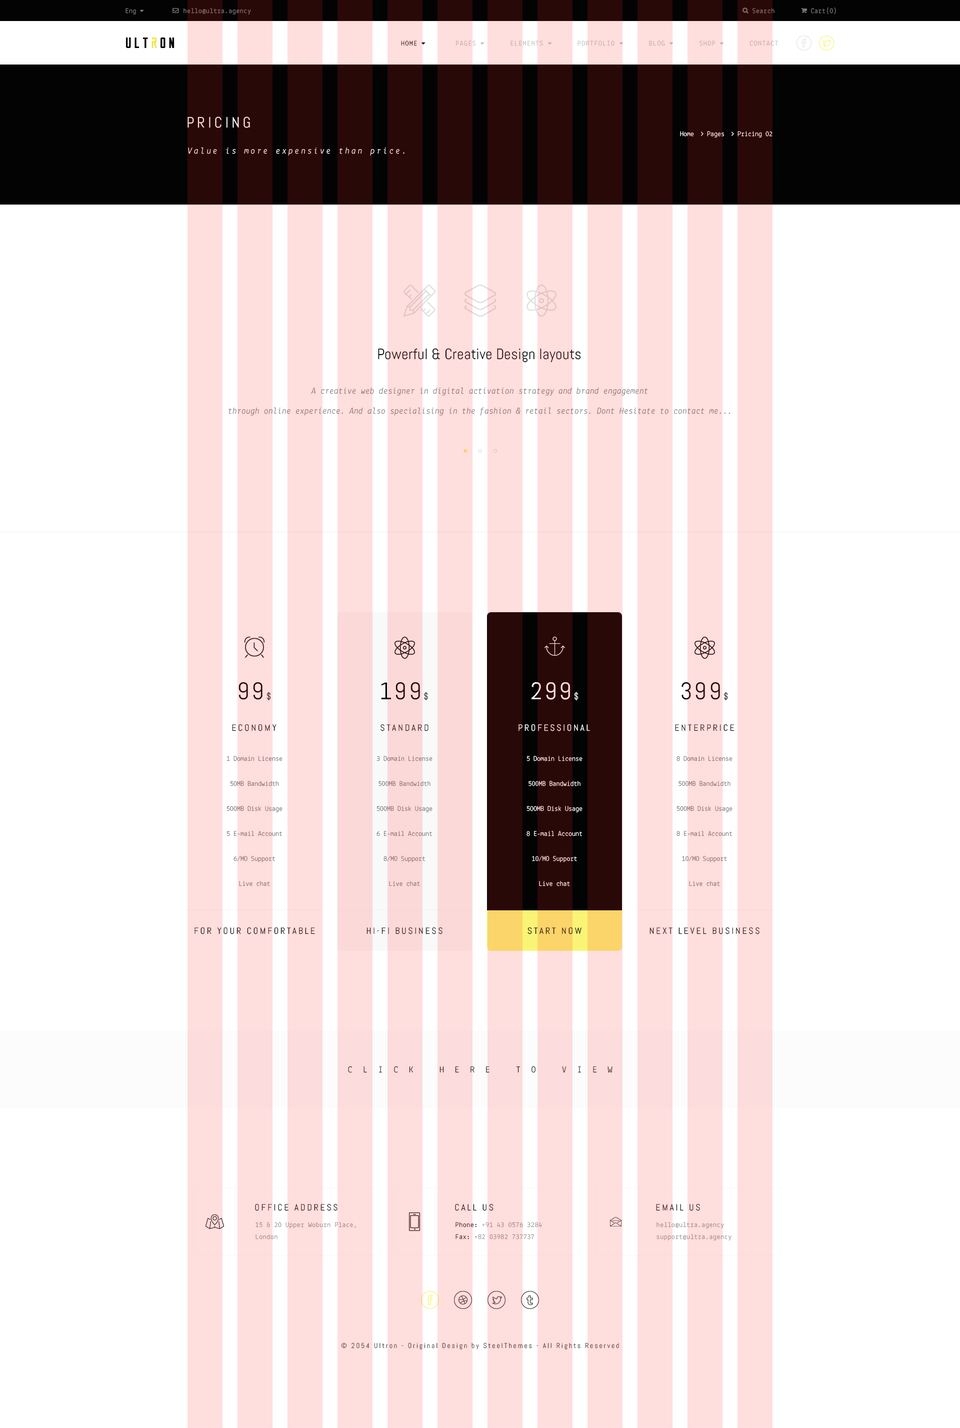
<style>
.page{position:relative;width:960px;height:1428px;background:#ffffff}
.page>*{position:absolute;margin:0}
.t1{font:7px "Lekton-Regular";letter-spacing:0.04em;color:#787878}
.t2{font:7px "Lekton-Regular";letter-spacing:0.1em;color:#bfbfbf;text-transform:uppercase}
.t3{font:7px "Lekton-Regular";letter-spacing:0.1em;color:#030303;text-transform:uppercase}
.t4{font:15px "Abel-Regular";letter-spacing:0.2em;color:#ffdede;text-transform:uppercase}
.t5{font:9px "Lekton-Italic";letter-spacing:0.2em;color:#ffdede}
.t6{font:15px "Abel-Regular"}
.t7{font:9px/20px "Lekton-Italic";color:#8c6b6b}
.t8{font:24px "Abel-Regular";letter-spacing:0.1em;color:#290808}
.t9{font:9px "Abel-Regular";letter-spacing:0.1em;color:#290808}
.t10{font:24px "Abel-Regular";letter-spacing:0.1em;color:#ffdede}
.t11{font:9px "Abel-Regular";letter-spacing:0.1em;color:#ffdede}
.t12{font:9px "Abel-Regular";letter-spacing:0.2em;text-transform:uppercase}
.t13{font:9px "Abel-Regular";letter-spacing:0.2em;color:#290808;text-transform:uppercase}
.t14{font:9px "Abel-Regular";letter-spacing:0.2em;color:#160505;text-transform:uppercase}
.t15{font:7px/25px "Lekton-Regular";color:#787878}
.t16{font:7px/25px "Lekton-Regular"}
.t17{font:9px "Lekton-Regular";letter-spacing:1.2em;color:#290808;text-transform:uppercase}
.t18{font:7px/12px "Lekton-Regular";letter-spacing:0.04em;color:#969595}
.t19{font:7px/12px "Lekton-Regular";letter-spacing:0.04em;color:#030303}
.t20{font:7px "Abel-Regular";letter-spacing:0.2em;color:#694848}
</style>
<div class="page">
<p class="t1" style="left:126px;top:8px;width:10px;height:7px">Eng</p>
<p class="t1" style="left:184px;top:8px;width:67px;height:7px">hello@ultra.agency</p>
<p class="t1" style="left:753px;top:8px;width:22px;height:6px">Search</p>
<p class="t1" style="left:811px;top:7px;width:25px;height:8px">Cart(0)</p>
<p class="t2" style="left:401px;top:41px;width:377px;height:5px"><span class="t3">Home         </span>Pages        Elements        Portfolio        Blog        Shop        Contact</p>
<p class="t4" style="left:188px;top:117px;width:62px;height:11px">pricing</p>
<p class="t5" style="left:188px;top:147px;width:217px;height:9px">Value is more expensive than price.</p>
<p class="t6" style="left:378px;top:348px;width:203px;height:15px">Powerful &amp; Creative Design layouts</p>
<p class="t7" style="left:229px;top:387px;width:501px;height:29px;text-align:center">A creative web designer in digital activation strategy and brand engagement<br>through online experience. And also specialising in the fashion &amp; retail sectors. Dont Hesitate to contact me...</p>
<p class="t8" style="left:239px;top:682px;width:32px;height:19px">99<span class="t9">$</span></p>
<p class="t8" style="left:381px;top:682px;width:47px;height:19px">199<span class="t9">$</span></p>
<p class="t10" style="left:532px;top:682px;width:47px;height:19px">299<span class="t11">$</span></p>
<p class="t8" style="left:682px;top:682px;width:46px;height:19px">399<span class="t9">$</span></p>
<p class="t12" style="left:232px;top:724px;width:45px;height:7px">economy</p>
<p class="t13" style="left:381px;top:724px;width:48px;height:7px">Standard</p>
<p class="t12" style="left:519px;top:724px;width:71px;height:7px">Professional</p>
<p class="t14" style="left:675px;top:724px;width:60px;height:7px">enterprice</p>
<p class="t15" style="left:227px;top:756px;width:56px;height:130px;text-align:center">1 Domain License<br>50MB Bandwidth<br>500MB Disk Usage<br>5 E-mail Account<br>6/MO Support<br>Live chat</p>
<p class="t15" style="left:377px;top:756px;width:56px;height:130px;text-align:center">3 Domain License<br>500MB Bandwidth<br>500MB Disk Usage<br>6 E-mail Account<br>8/MO Support<br>Live chat</p>
<p class="t16" style="left:527px;top:756px;width:56px;height:130px;text-align:center">5 Domain License<br>500MB Bandwidth<br>500MB Disk Usage<br>8 E-mail Account<br>10/MO Support<br>Live chat</p>
<p class="t15" style="left:677px;top:756px;width:56px;height:130px;text-align:center">8 Domain License<br>500MB Bandwidth<br>500MB Disk Usage<br>8 E-mail Account<br>10/MO Support<br>Live chat</p>
<p class="t12" style="left:195px;top:927px;width:120px;height:7px">for your comfortable</p>
<p class="t12" style="left:367px;top:927px;width:76px;height:7px">Hi-fi business</p>
<p class="t12" style="left:528px;top:927px;width:54px;height:7px">start Now</p>
<p class="t13" style="left:650px;top:927px;width:110px;height:7px">next level business</p>
<p class="t17" style="left:348px;top:1066px;width:265px;height:7px">Click here to view</p>
<p class="t12" style="left:255px;top:1204px;width:83px;height:7px">Office Address</p>
<p class="t12" style="left:455px;top:1204px;width:39px;height:7px">Call us</p>
<p class="t12" style="left:656px;top:1204px;width:44px;height:7px">Email us</p>
<p class="t18" style="left:256px;top:1222px;width:100px;height:17px">15 &amp; 20 Upper Woburn Place,<br>London</p>
<p class="t18" style="left:456px;top:1222px;width:86px;height:17px"><span class="t19">Phone:</span> +91 43 0576 3284<br><span class="t19">Fax:</span> +82 03982 737737</p>
<p class="t18" style="left:657px;top:1222px;width:75px;height:18px">hello@ultra.agency<br>support@ultra.agency</p>
<p class="t20" style="left:341px;top:1342px;width:278px;height:7px">© 2054 Ultron - Original Design by SteelThemes - All Rights Reserved</p>
</div>
